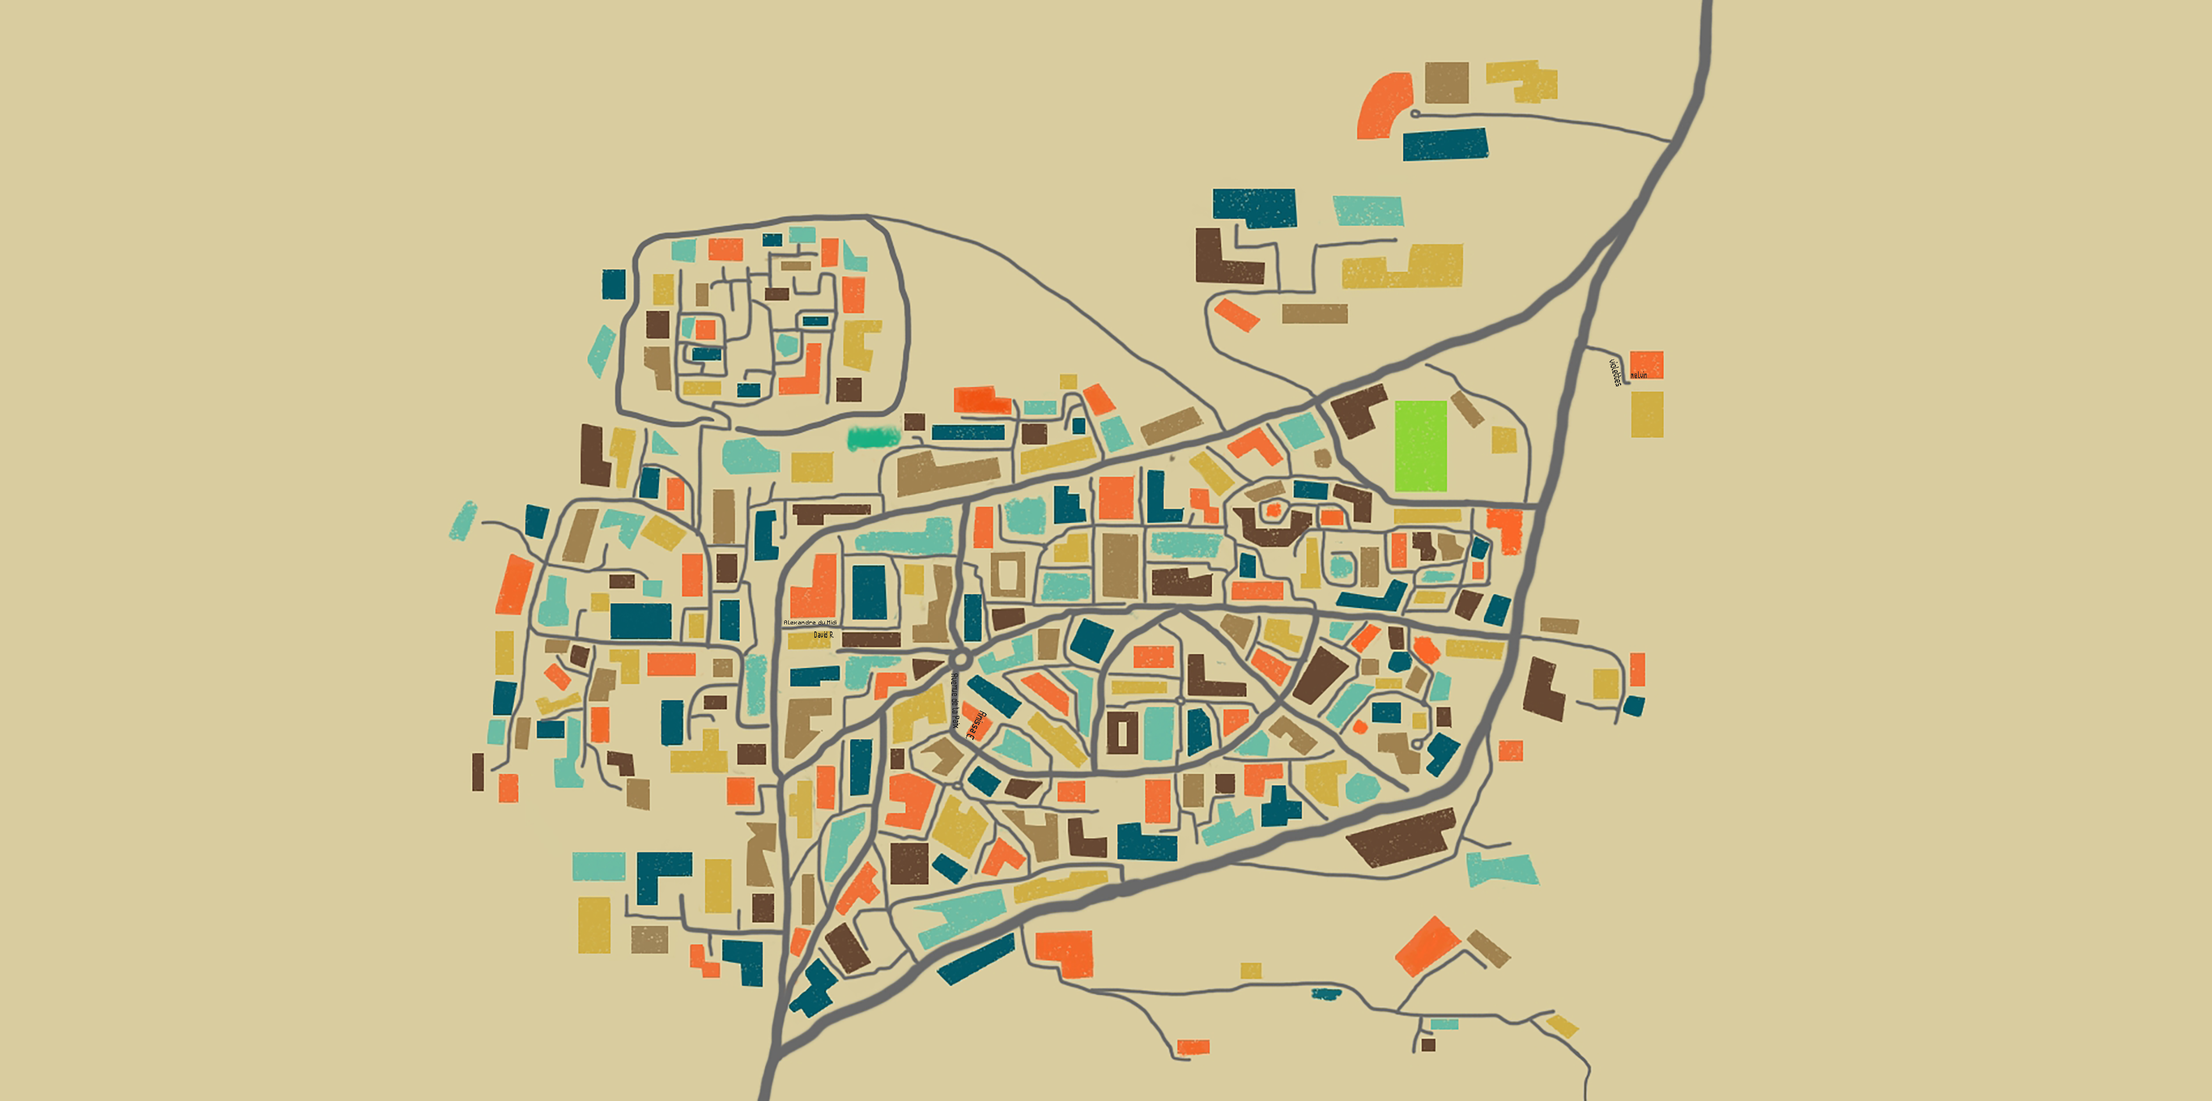
<style>
.page{position:relative;width:2212px;height:1101px;background:#d9cc9f}
.page>*{position:absolute;margin:0}
.t1{font:9.6px "Retron2000";color:#282828;scale:0.57 1}
.t2{font:8.9px "Retron2000";color:#282828;scale:0.57 1}
.t3{font:5px "Retron2000";color:#282828;scale:1.12 1}
.t4{font:8.2px "Retron2000";color:#282828;scale:0.58 1}
.t5{font:9.1px "Retron2000";color:#282828;scale:0.63 1}
.t6{font:10.1px "Retron2000";color:#282828;scale:0.66 1}
</style>
<div class="page">
<p class="t1" style="left:1610px;top:359px;width:11px;height:28px;rotate:75deg">violettes</p>
<p class="t2" style="left:1631px;top:371px;width:16px;height:7px">melvin</p>
<p class="t3" style="left:784px;top:621px;width:53px;height:4px">Alexandre du Midi</p>
<p class="t4" style="left:814px;top:632px;width:20px;height:6px">David R.</p>
<p class="t5" style="left:951px;top:674px;width:9px;height:54px;rotate:88deg">Avenue de la Paix</p>
<p class="t6" style="left:966px;top:711px;width:21px;height:30px;rotate:118deg">Anissa E.</p>
</div>
